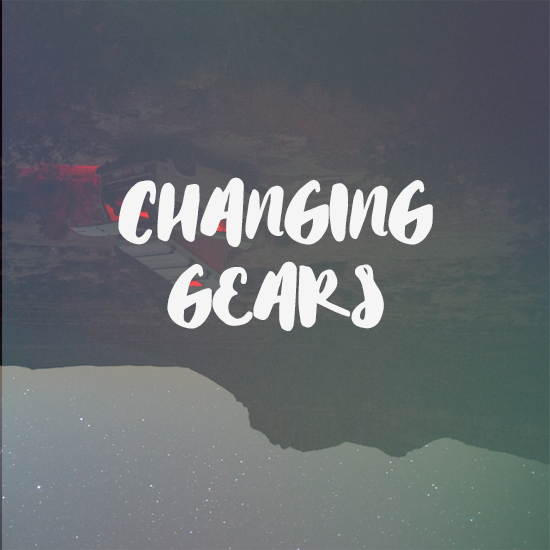
<style>
.page{position:relative;width:550px;height:550px}
.page>*{position:absolute;margin:0}
.t1{font:90px/84px "Matilda";color:#f5f5f5;text-transform:uppercase}
</style>
<div class="page">
<p class="t1" style="left:118px;top:177px;width:315px;height:154px;text-align:center">Changing<br>gears</p>
</div>
